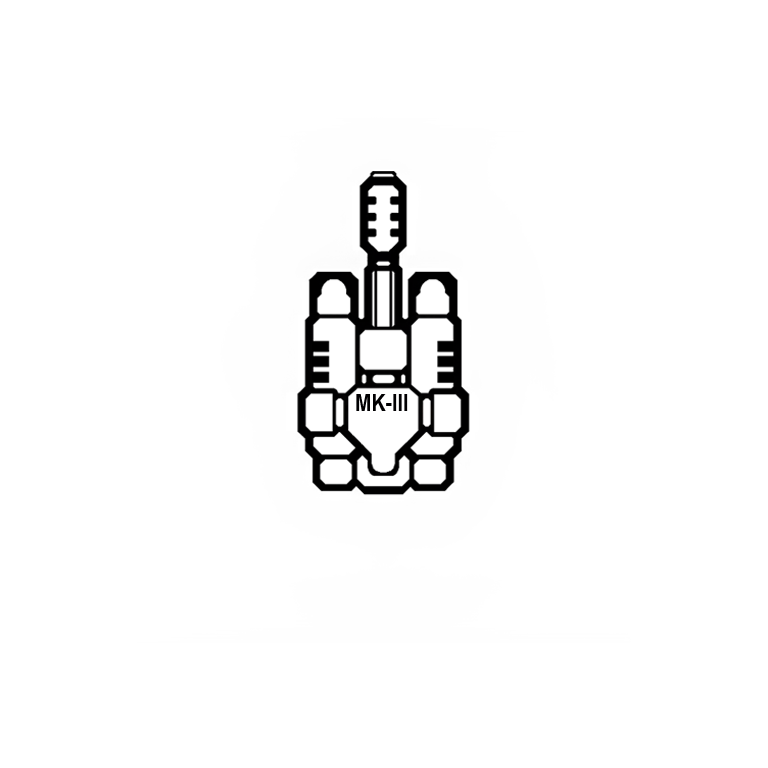
<style>
.page{position:relative;width:768px;height:768px;background:#ffffff}
.page>*{position:absolute;margin:0}
.t1{font:24px "ArialNarrow-Bold";color:#010002}
</style>
<div class="page">
<p class="t1" style="left:356px;top:394px;width:52px;height:17px">MK-III</p>
</div>
